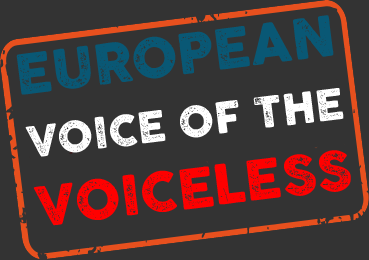
<style>
.page{position:relative;width:369px;height:260px;background:#333333}
.page>*{position:absolute;margin:0}
.t1{font:42px "COCOGOOSELETTERPRESS";color:#ffffff}
.t2{font:54px "COCOGOOSELETTERPRESS";color:#ff0000}
</style>
<div class="page">
<p class="t1" style="left:25px;top:88px;width:319px;height:69px;rotate:-7deg">VOICE OF THE</p>
<p class="t2" style="left:33px;top:150px;width:318px;height:76px;rotate:-7deg">VOICELESS</p>
</div>
